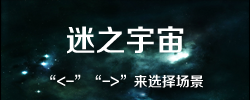
<style>
.page{position:relative;width:250px;height:100px}
.page>*{position:absolute;margin:0}
.t1{font:30px "FZZZHONGJW--GB1-0";color:#ffffff}
.t2{font:14px "FZZZHONGJW--GB1-0";color:#ffffff}
</style>
<div class="page">
<p class="t1" style="left:67px;top:26px;width:117px;height:28px">迷之宇宙</p>
<p class="t2" style="left:50px;top:74px;width:153px;height:14px">“&lt;-”“-&gt;”来选择场景</p>
</div>
